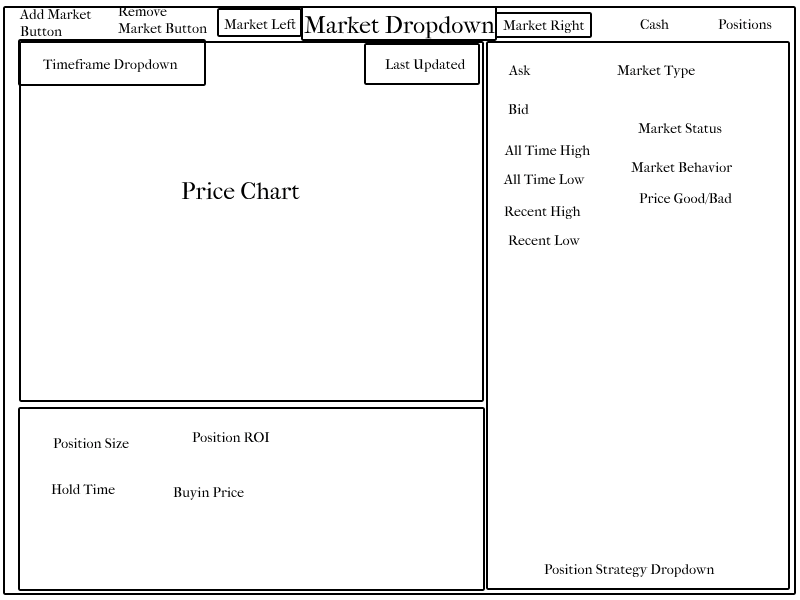
<style>
.page{position:relative;width:800px;height:600px;background:#ffffff}
.page>*{position:absolute;margin:0}
.t1{font:14px "IM_FELL_French_Canon_Roman";color:#000000}
.t2{font:24px "IM_FELL_French_Canon_Roman";color:#000000}
</style>
<div class="page">
<p class="t1" style="left:118px;top:6px;width:89px;height:28px">Remove Market Button</p>
<p class="t1" style="left:19px;top:9px;width:73px;height:28px">Add Market Button</p>
<p class="t2" style="left:304px;top:16px;width:191px;height:23px">Market Dropdown</p>
<p class="t1" style="left:224px;top:18px;width:72px;height:12px">Market Left</p>
<p class="t1" style="left:503px;top:20px;width:82px;height:14px">Market Right</p>
<p class="t1" style="left:640px;top:19px;width:29px;height:11px">Cash</p>
<p class="t1" style="left:718px;top:19px;width:54px;height:11px">Positions</p>
<p class="t1" style="left:43px;top:58px;width:135px;height:15px">Timeframe Dropdown</p>
<p class="t1" style="left:385px;top:58px;width:81px;height:15px">Last Updated</p>
<p class="t1" style="left:508px;top:65px;width:23px;height:11px">Ask</p>
<p class="t1" style="left:617px;top:65px;width:78px;height:14px">Market Type</p>
<p class="t1" style="left:508px;top:104px;width:21px;height:11px">Bid</p>
<p class="t1" style="left:638px;top:123px;width:84px;height:11px">Market Status</p>
<p class="t1" style="left:504px;top:145px;width:87px;height:14px">All Time High</p>
<p class="t1" style="left:503px;top:173px;width:82px;height:12px">All Time Low</p>
<p class="t1" style="left:631px;top:162px;width:102px;height:11px">Market Behavior</p>
<p class="t2" style="left:181px;top:182px;width:119px;height:18px">Price Chart</p>
<p class="t1" style="left:639px;top:192px;width:94px;height:13px">Price Good/Bad</p>
<p class="t1" style="left:504px;top:206px;width:77px;height:14px">Recent High</p>
<p class="t1" style="left:508px;top:234px;width:73px;height:12px">Recent Low</p>
<p class="t1" style="left:53px;top:438px;width:76px;height:11px">Position Size</p>
<p class="t1" style="left:192px;top:432px;width:78px;height:11px">Position ROI</p>
<p class="t1" style="left:51px;top:484px;width:64px;height:11px">Hold Time</p>
<p class="t1" style="left:173px;top:487px;width:71px;height:13px">Buyin Price</p>
<p class="t1" style="left:544px;top:564px;width:171px;height:14px">Position Strategy Dropdown</p>
</div>
